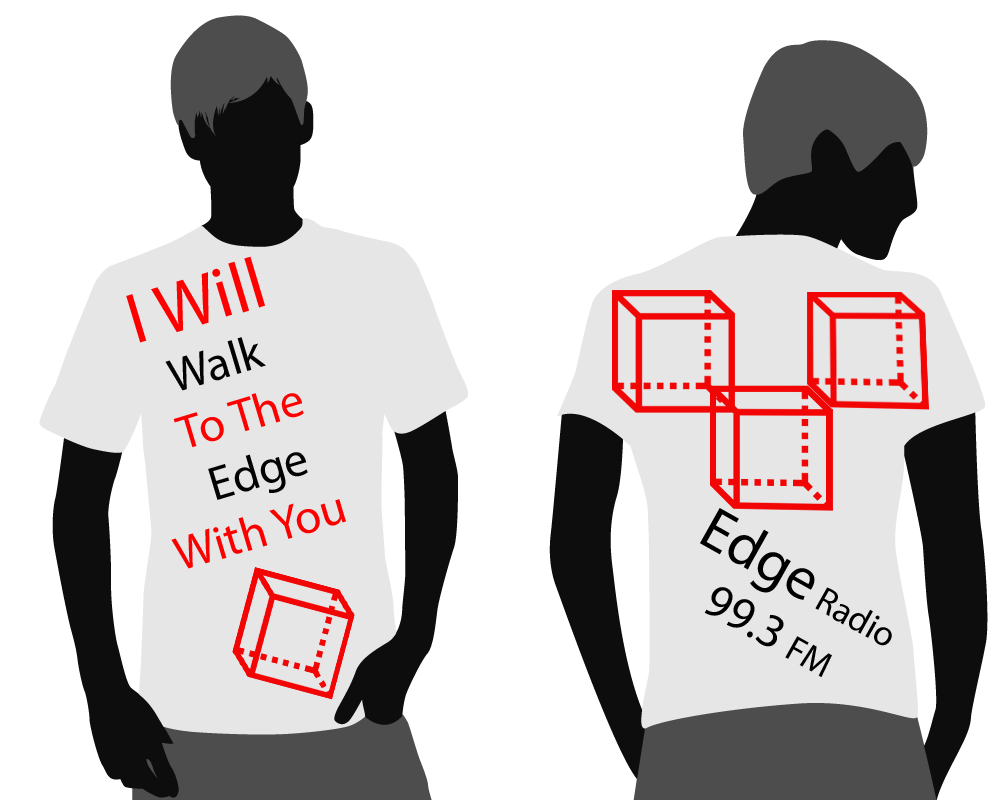
<style>
.page{position:relative;width:1000px;height:800px;background:#ffffff}
.page>*{position:absolute;margin:0}
.t1{font:48px "MyriadPro-Regular";color:#fc0000}
.t2{font:72px "MyriadPro-Regular";color:#000000}
.t3{font:72px "MyriadPro-Regular";color:#ff0000}
.t4{font:48px "MyriadPro-Regular";color:#030303}
.t5{font:48px "MyriadPro-Regular";color:#ff0000}
.t6{font:36px "MyriadPro-Regular";color:#000000}
.t7{font:60px "MyriadPro-Regular";color:#000000}
.t8{font:48px "MyriadPro-Regular";color:#000000}
</style>
<div class="page">
<p class="t1" style="left:126px;top:256px;width:221px;height:313px;rotate:-17deg"><span class="t2"> </span><span class="t3"> I Will <br>       </span><span class="t4">Walk <br>      </span><span class="t5">To The<br></span><span class="t4">      Edge <br> </span>With You</p>
<p class="t6" style="left:700px;top:508px;width:192px;height:170px;rotate:29deg"><span class="t7">Edge</span> Radio<br>     <span class="t8">99.3 </span>FM</p>
</div>
